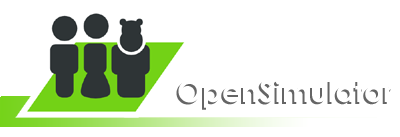
<style>
.page{position:relative;width:400px;height:137px;background:#ffffff}
.page>*{position:absolute;margin:0}
.t1{font:30px "CenturyGothic-Bold"}
</style>
<div class="page">
<p class="t1" style="left:176px;top:81px;width:215px;height:29px">OpenSimulator</p>
</div>
